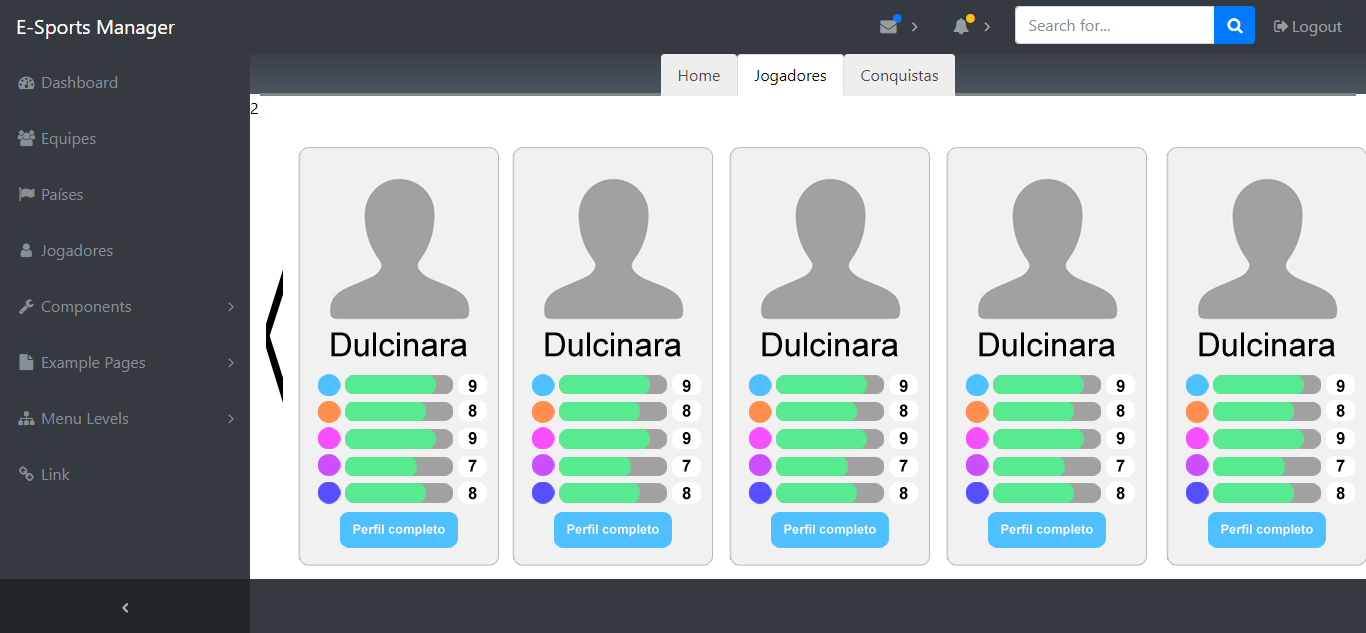
<style>
.page{position:relative;width:1366px;height:633px;background:#f1f1f1}
.page>*{position:absolute;margin:0}
.t1{font:272.5px "ArialMT";color:#000000;scale:0.13 1}
.t2{font:33px "ArialMT";color:#000000}
.t3{font:16.5px "Arial-BoldMT";color:#000000}
.t4{font:12.8px "Arial-BoldMT";color:#ffffff}
</style>
<div class="page">
<p class="t1" style="left:266px;top:270px;width:17px;height:133px">&lt;</p>
<p class="t2" style="left:331px;top:332px;width:136px;height:25px">Dulcinara</p>
<p class="t2" style="left:545px;top:332px;width:136px;height:25px">Dulcinara</p>
<p class="t2" style="left:762px;top:332px;width:136px;height:25px">Dulcinara</p>
<p class="t2" style="left:979px;top:332px;width:136px;height:25px">Dulcinara</p>
<p class="t2" style="left:1199px;top:332px;width:136px;height:25px">Dulcinara</p>
<p class="t3" style="left:468px;top:379px;width:9px;height:13px">9</p>
<p class="t3" style="left:682px;top:379px;width:9px;height:13px">9</p>
<p class="t3" style="left:899px;top:379px;width:9px;height:13px">9</p>
<p class="t3" style="left:1116px;top:379px;width:9px;height:13px">9</p>
<p class="t3" style="left:1336px;top:379px;width:9px;height:13px">9</p>
<p class="t3" style="left:468px;top:404px;width:9px;height:13px">8</p>
<p class="t3" style="left:682px;top:404px;width:9px;height:13px">8</p>
<p class="t3" style="left:899px;top:404px;width:9px;height:13px">8</p>
<p class="t3" style="left:1116px;top:404px;width:9px;height:13px">8</p>
<p class="t3" style="left:1336px;top:404px;width:9px;height:13px">8</p>
<p class="t3" style="left:468px;top:432px;width:9px;height:13px">9</p>
<p class="t3" style="left:682px;top:432px;width:9px;height:13px">9</p>
<p class="t3" style="left:899px;top:432px;width:9px;height:13px">9</p>
<p class="t3" style="left:1116px;top:432px;width:9px;height:13px">9</p>
<p class="t3" style="left:1336px;top:432px;width:9px;height:13px">9</p>
<p class="t3" style="left:468px;top:459px;width:9px;height:13px">7</p>
<p class="t3" style="left:682px;top:459px;width:9px;height:13px">7</p>
<p class="t3" style="left:899px;top:459px;width:9px;height:13px">7</p>
<p class="t3" style="left:1116px;top:459px;width:9px;height:13px">7</p>
<p class="t3" style="left:1336px;top:459px;width:9px;height:13px">7</p>
<p class="t3" style="left:468px;top:487px;width:9px;height:13px">8</p>
<p class="t3" style="left:682px;top:487px;width:9px;height:13px">8</p>
<p class="t3" style="left:899px;top:487px;width:9px;height:13px">8</p>
<p class="t3" style="left:1116px;top:487px;width:9px;height:13px">8</p>
<p class="t3" style="left:1336px;top:487px;width:9px;height:13px">8</p>
<p class="t4" style="left:353px;top:524px;width:92px;height:13px">Perfil completo</p>
<p class="t4" style="left:567px;top:524px;width:92px;height:13px">Perfil completo</p>
<p class="t4" style="left:784px;top:524px;width:92px;height:13px">Perfil completo</p>
<p class="t4" style="left:1001px;top:524px;width:92px;height:13px">Perfil completo</p>
<p class="t4" style="left:1221px;top:524px;width:92px;height:13px">Perfil completo</p>
</div>
